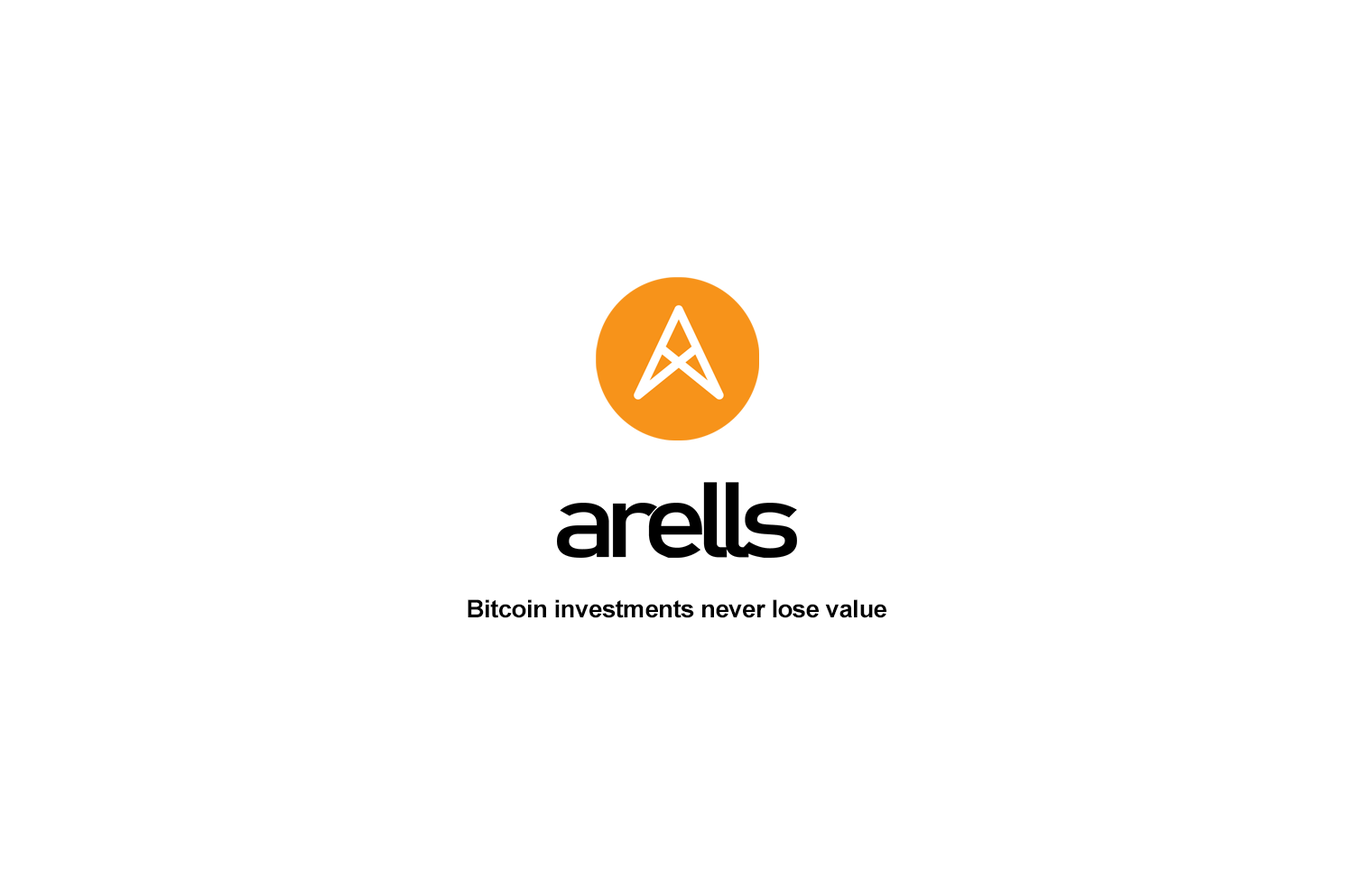
<style>
.page{position:relative;width:1354px;height:880px;background:#ffffff}
.page>*{position:absolute;margin:0}
.t1{font:24.5px "Arial-BoldMT";letter-spacing:-0.02em;color:#000000}
</style>
<div class="page">
<p class="t1" style="left:468px;top:600px;width:419px;height:19px">Bitcoin investments never lose value</p>
</div>
